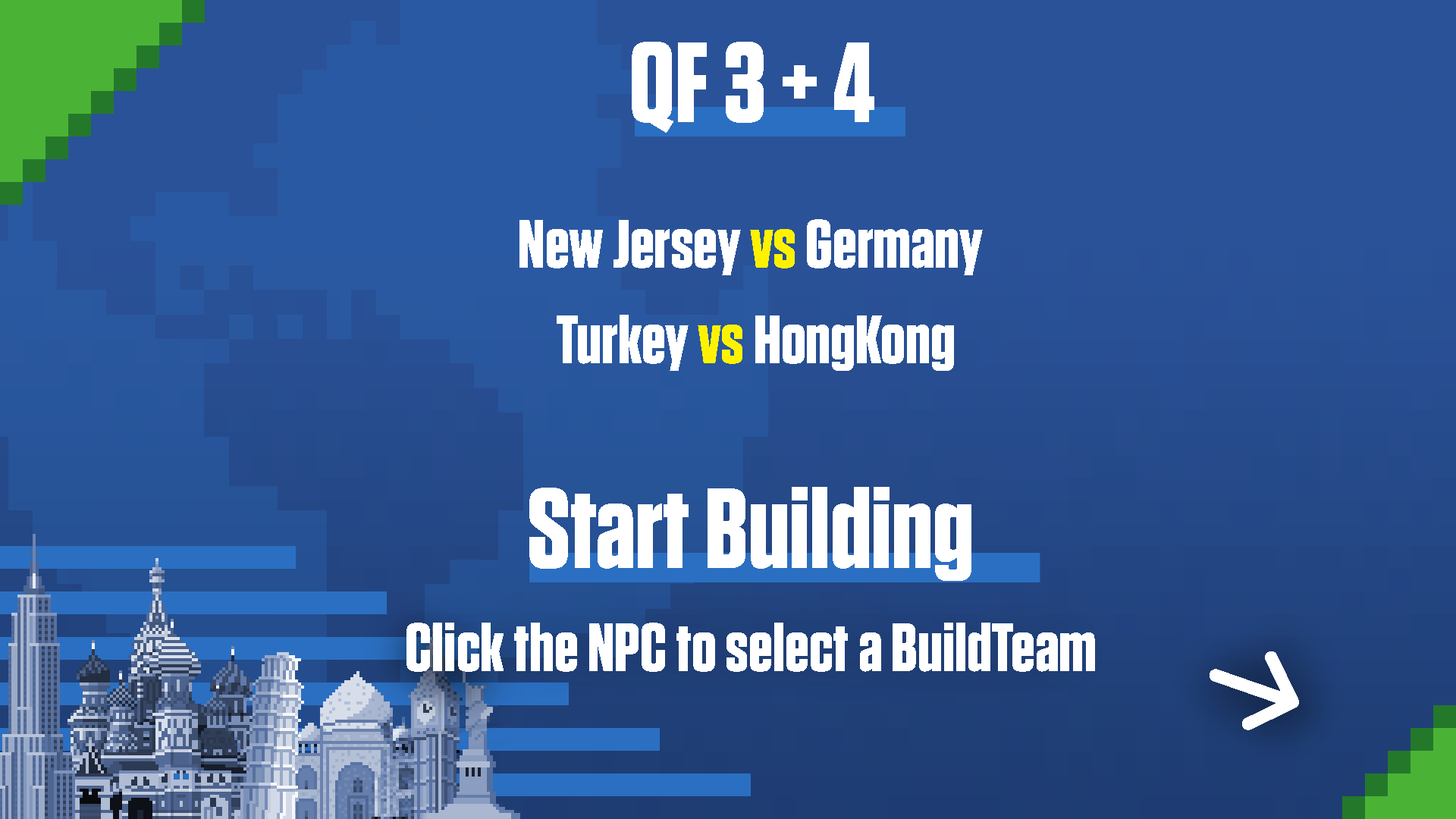
<style>
.page{position:relative;width:1456px;height:819px}
.page>*{position:absolute;margin:0}
.t1{font:113.7px "Tungsten-Bold";color:#ffffff}
.t2{font:68.2px "Tungsten-Bold";color:#ffffff}
.t3{font:68.2px "Tungsten-Bold";color:#fff200}
</style>
<div class="page">
<p class="t1" style="left:632px;top:42px;width:242px;height:91px">QF 3 + 4</p>
<p class="t2" style="left:519px;top:219px;width:464px;height:56px">New Jersey <span class="t3">vs </span>Germany</p>
<p class="t2" style="left:557px;top:315px;width:397px;height:56px">Turkey <span class="t3">vs </span>HongKong</p>
<p class="t1" style="left:529px;top:487px;width:442px;height:94px">Start Building</p>
<p class="t2" style="left:406px;top:623px;width:689px;height:49px">Click the NPC to select a BuildTeam</p>
</div>
